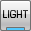
<style>
.page{position:relative;width:31px;height:31px}
.page>*{position:absolute;margin:0}
.t1{font:10px "Eurostile-Condensed";letter-spacing:0.02em;color:#000000}
</style>
<div class="page">
<p class="t1" style="left:3px;top:10px;width:25px;height:8px">LIGHT</p>
</div>
